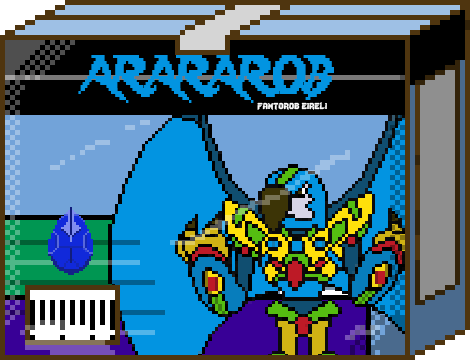
<style>
.page{position:relative;width:470px;height:360px}
.page>*{position:absolute;margin:0}
.t1{font:48px "Lady-Radical";color:#0294e1;scale:0.72 1}
.t2{font:12px "Lady-Radical";color:#fbfbfb}
</style>
<div class="page">
<p class="t1" style="left:78px;top:55px;width:256px;height:48px">ARARAROB</p>
<p class="t2" style="left:257px;top:102px;width:70px;height:8px">fantorob eireli</p>
</div>
